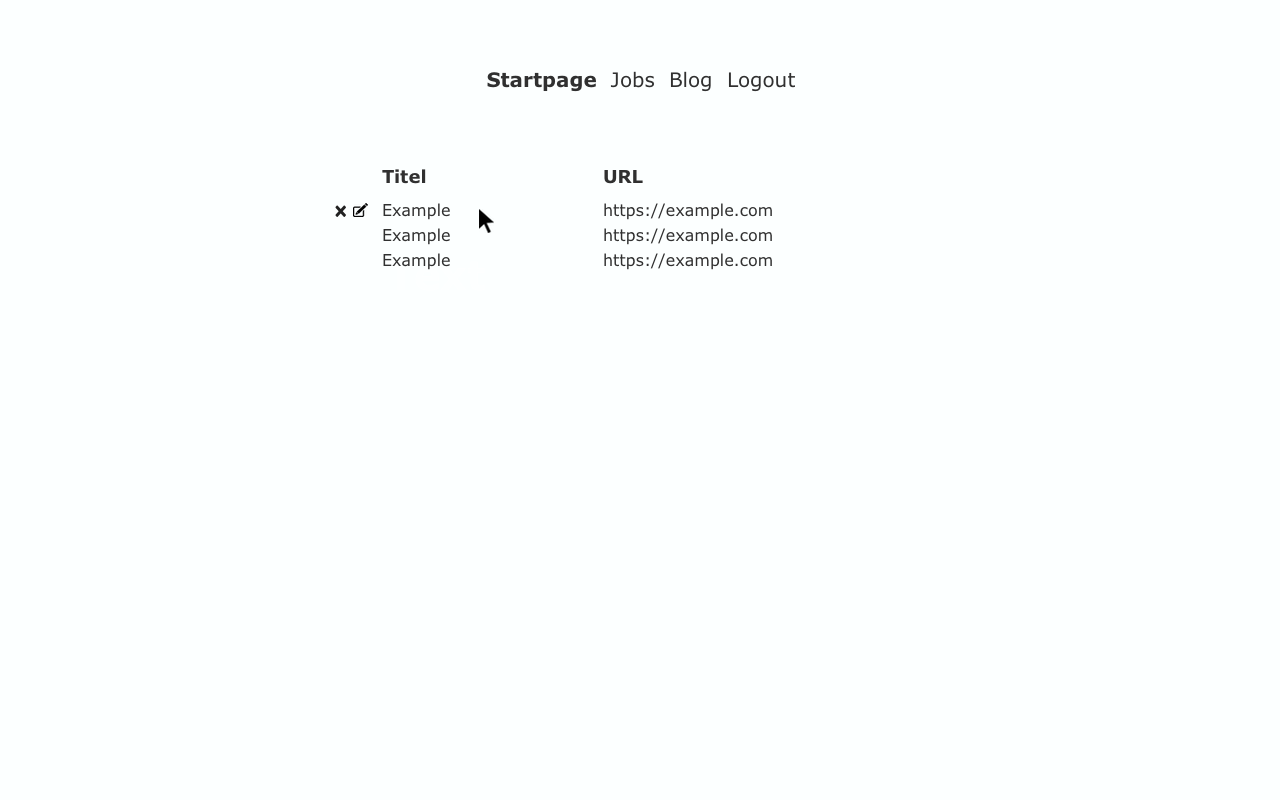
<style>
.page{position:relative;width:1280px;height:800px;background:#fcffff}
.page>*{position:absolute;margin:0}
.t1{font:20px "Verdana";color:#303030}
.t2{font:20px "Verdana-Bold";color:#303030}
.t3{font:18px "Verdana-Bold";color:#303030}
.t4{font:16px "Verdana";color:#303030}
</style>
<div class="page">
<p class="t1" style="left:487px;top:71px;width:308px;height:21px"><span class="t2">Startpage</span>  Jobs  Blog  Logout</p>
<p class="t3" style="left:382px;top:169px;width:44px;height:15px">Titel</p>
<p class="t3" style="left:604px;top:170px;width:39px;height:14px">URL</p>
<p class="t4" style="left:383px;top:203px;width:67px;height:17px">Example</p>
<p class="t4" style="left:604px;top:203px;width:168px;height:17px">https://example.com</p>
<p class="t4" style="left:383px;top:228px;width:67px;height:17px">Example</p>
<p class="t4" style="left:604px;top:228px;width:168px;height:17px">https://example.com</p>
<p class="t4" style="left:383px;top:253px;width:67px;height:17px">Example</p>
<p class="t4" style="left:604px;top:253px;width:168px;height:17px">https://example.com</p>
</div>
